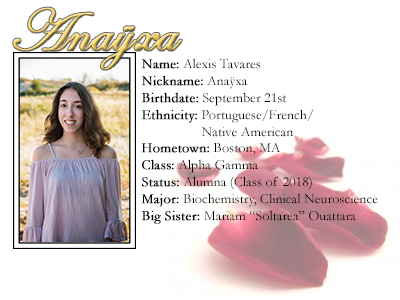
<style>
.page{position:relative;width:400px;height:300px;background:#ffffff}
.page>*{position:absolute;margin:0}
.t1{font:60px "EdwardianScriptITC";font-weight:bold}
.t2{font:14px "Garamond";color:#000000}
.t3{font:14px "Garamond";color:#000000;font-weight:bold}
.t4{font:14px "Garamond";color:#ffffff;font-weight:bold}
</style>
<div class="page">
<p class="t1" style="left:13px;top:7px;width:169px;height:63px">Anaÿxa</p>
<p class="t2" style="left:141px;top:58px;width:237px;height:166px"><span class="t3">Name:</span> Alexis Tavares<br><span class="t3">Nickname:</span> Anaÿxa<br><span class="t3">Birthdate:</span> September 21st<br><span class="t3">Ethnicity:</span> Portuguese/French/<br><span class="t4">Ethnicity: </span>Native American<br><span class="t3">Hometown:</span> Boston, MA<br><span class="t3">Class:</span> Alpha Gamma<br><span class="t3">Status:</span> Alumna (Class of 2018)<br><span class="t3">Major:</span> Biochemistry, Clinical Neuroscience<br><span class="t3">Big Sister: </span>Mariam “Soltarea” Ouattara</p>
</div>
